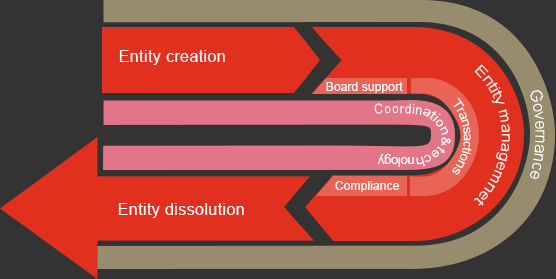
<style>
.page{position:relative;width:556px;height:279px;background:#e1301e}
.page>*{position:absolute;margin:0}
.t1{font:16px "ArialMT";letter-spacing:0.025em;color:#ffffff}
.t2{font:14px "ArialMT";color:#ffffff}
.t3{font:12px "ArialMT";letter-spacing:0.01em;color:#ffffff}
.t4{font:16px "ArialMT";letter-spacing:-0.025em;color:#ffffff}
.t5{font:12px "ArialMT";letter-spacing:-0.05em;color:#ffffff}
.t6{font:13px "ArialMT";color:#ffffff}
.t7{font:13px "ArialMT";letter-spacing:-0.025em;color:#ffffff}
</style>
<div class="page">
<p class="t1" style="left:119px;top:50px;width:106px;height:15px">Entity creation</p>
<p class="t2" style="left:473px;top:64px;width:37px;height:142px;rotate:90deg">Entity managemnet</p>
<p class="t3" style="left:326px;top:82px;width:77px;height:11px">Board support</p>
<p class="t4" style="left:530px;top:89px;width:15px;height:90px;rotate:90deg">Governance</p>
<p class="t5" style="left:452px;top:97px;width:20px;height:78px;rotate:90deg">Transactions</p>
<p class="t6" style="left:374px;top:103px;width:48px;height:12px;rotate:1deg">Coordin</p>
<p class="t7" style="left:423px;top:108px;width:26px;height:28px;rotate:47deg">ation</p>
<p class="t7" style="left:441px;top:137px;width:10px;height:9px;rotate:90deg">&amp;</p>
<p class="t7" style="left:416px;top:146px;width:29px;height:21px;rotate:153deg">tech</p>
<p class="t7" style="left:377px;top:154px;width:37px;height:13px;rotate:180deg">nology</p>
<p class="t3" style="left:335px;top:181px;width:64px;height:11px">Compliance</p>
<p class="t1" style="left:118px;top:203px;width:126px;height:15px">Entity dissolution</p>
</div>
